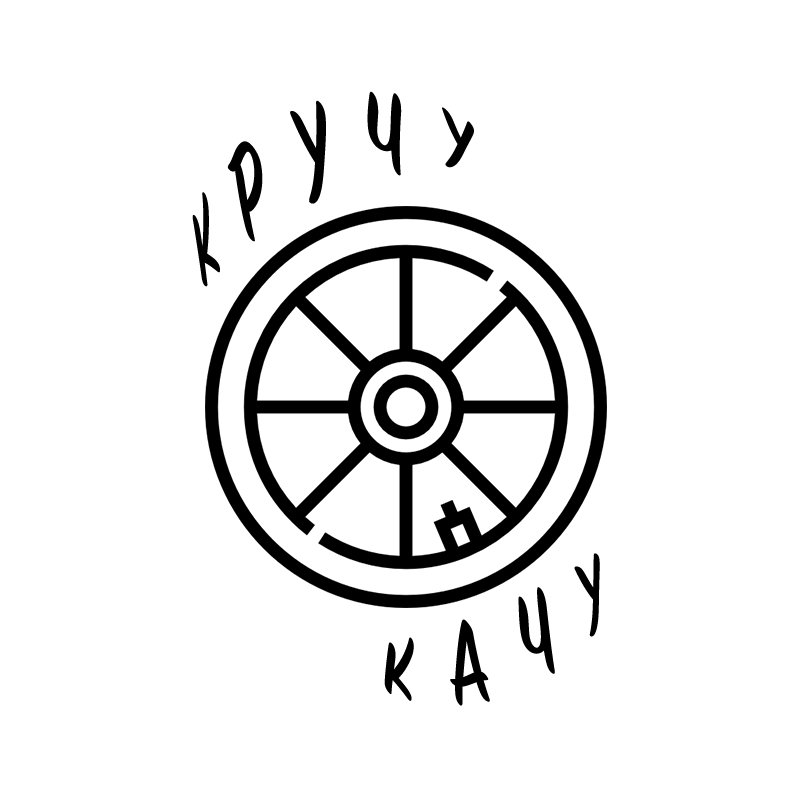
<style>
.page{position:relative;width:800px;height:800px;background:#ffffff}
.page>*{position:absolute;margin:0}
.t1{font:77.5px "SignPainter-HouseScriptSemibold";color:#010101}
.t2{font:77.5px "SignPainter-HouseScriptSemibold";color:#000000}
</style>
<div class="page">
<p class="t1" style="left:192px;top:91px;width:282px;height:196px;rotate:-23deg">К  Р  У  Ч  У</p>
<p class="t2" style="left:384px;top:553px;width:216px;height:153px;rotate:-23deg">К  А  Ч  У</p>
</div>
